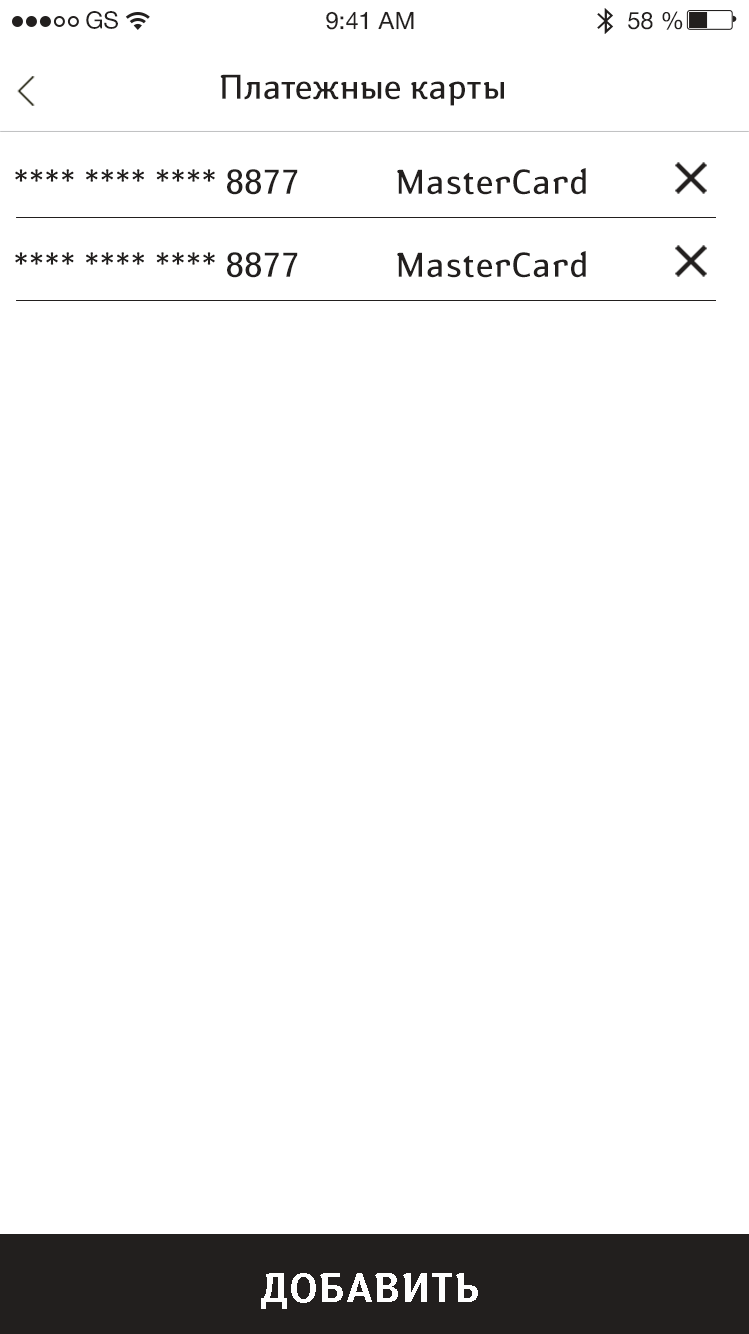
<style>
.page{position:relative;width:749px;height:1334px;background:#ffffff}
.page>*{position:absolute;margin:0}
.t1{font:24px "HelveticaNeueCyr-Roman";color:#221f1e}
.t2{font:34px "SusanBook-Regular";color:#221f1e}
.t3{font:34px "SusanBook-Regular";letter-spacing:0.016em;color:#221f1e}
.t4{font:40px "SusanBold-Regular";letter-spacing:0.012em;color:#fefefe}
</style>
<div class="page">
<p class="t1" style="left:86px;top:11px;width:32px;height:18px">GS</p>
<p class="t1" style="left:326px;top:11px;width:88px;height:19px">9:41 AM</p>
<p class="t1" style="left:628px;top:11px;width:55px;height:19px">58 %</p>
<p class="t2" style="left:220px;top:74px;width:284px;height:32px">Платежные карты</p>
<p class="t3" style="left:15px;top:169px;width:283px;height:26px">**** **** **** 8877</p>
<p class="t3" style="left:397px;top:168px;width:189px;height:27px">MasterCard</p>
<p class="t3" style="left:15px;top:252px;width:283px;height:26px">**** **** **** 8877</p>
<p class="t3" style="left:397px;top:251px;width:189px;height:27px">MasterCard</p>
<p class="t4" style="left:261px;top:1273px;width:217px;height:36px">ДОБАВИТЬ</p>
</div>
